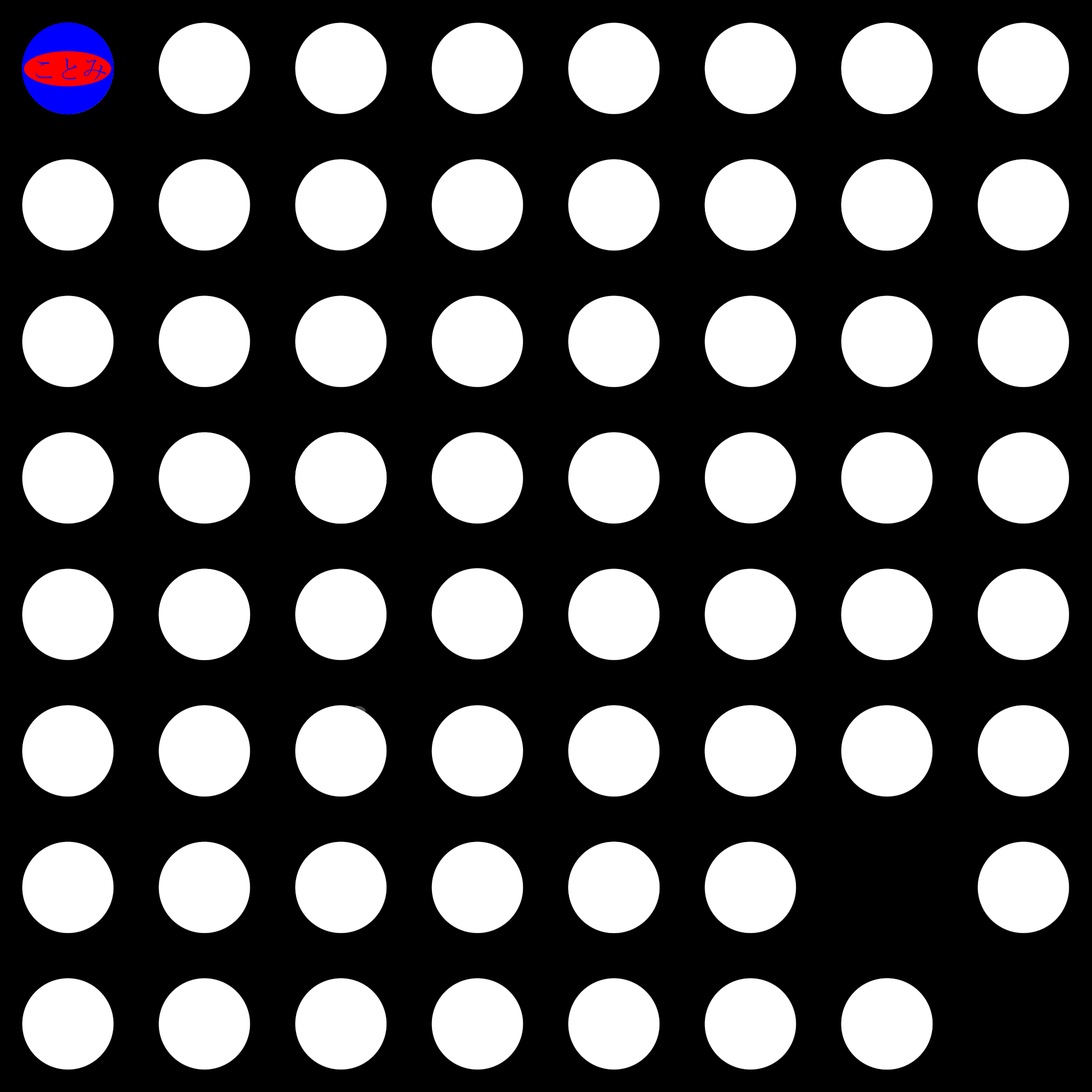
<style>
.page{position:relative;width:1092px;height:1092px;background:#000000}
.page>*{position:absolute;margin:0}
.t1{font:25.6px "MS-Mincho";color:#0000ff}
</style>
<div class="page">
<p class="t1" style="left:35px;top:59px;width:72px;height:22px">ことみ</p>
</div>
